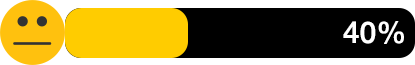
<style>
.page{position:relative;width:415px;height:65px;background:#000000}
.page>*{position:absolute;margin:0}
.t1{font:30px "HelveticaNeueCyr-Medium";color:#ffffff}
</style>
<div class="page">
<p class="t1" style="left:343px;top:21px;width:61px;height:23px">40%</p>
</div>
